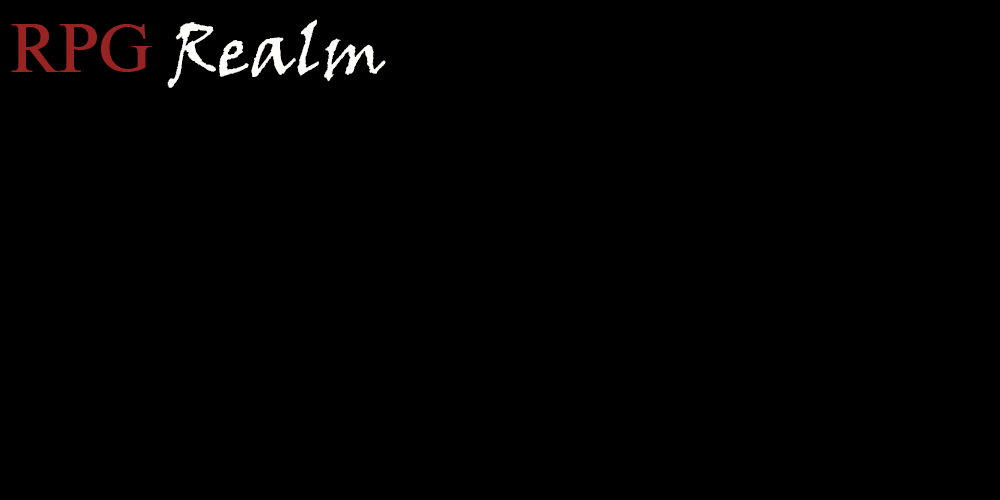
<style>
.page{position:relative;width:1000px;height:500px;background:#000000}
.page>*{position:absolute;margin:0}
.t1{font:72px "VinerHandITC";color:#fefbfb}
.t2{font:72px "NimbusRomD-Regu";color:#972323}
</style>
<div class="page">
<p class="t1" style="left:11px;top:19px;width:375px;height:69px"><span class="t2">RPG</span> Realm</p>
</div>
